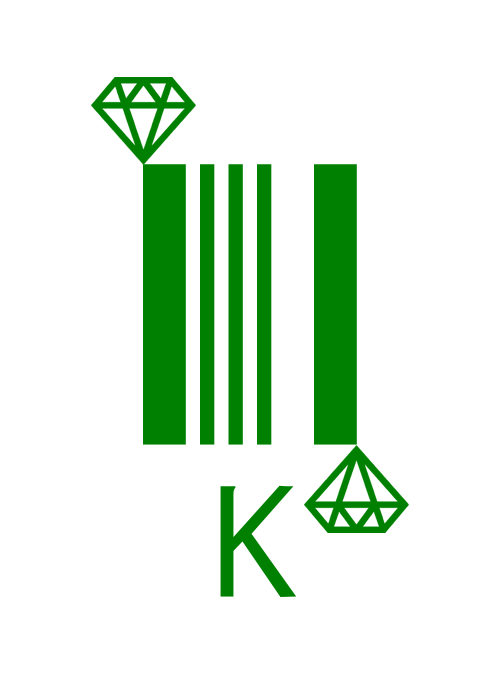
<style>
.page{position:relative;width:500px;height:700px;background:#ffffff}
.page>*{position:absolute;margin:0}
.t1{font:475.3px "LibreBarcode39ExtendedText-Regular";color:#008000}
</style>
<div class="page">
<p class="t1" style="left:143px;top:164px;width:214px;height:433px">K</p>
</div>
